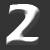
<style>
.page{position:relative;width:50px;height:50px;background:#333333}
.page>*{position:absolute;margin:0}
.t1{font:60px "ErasITC-Bold"}
</style>
<div class="page">
<p class="t1" style="left:6px;top:4px;width:34px;height:41px">2</p>
</div>
